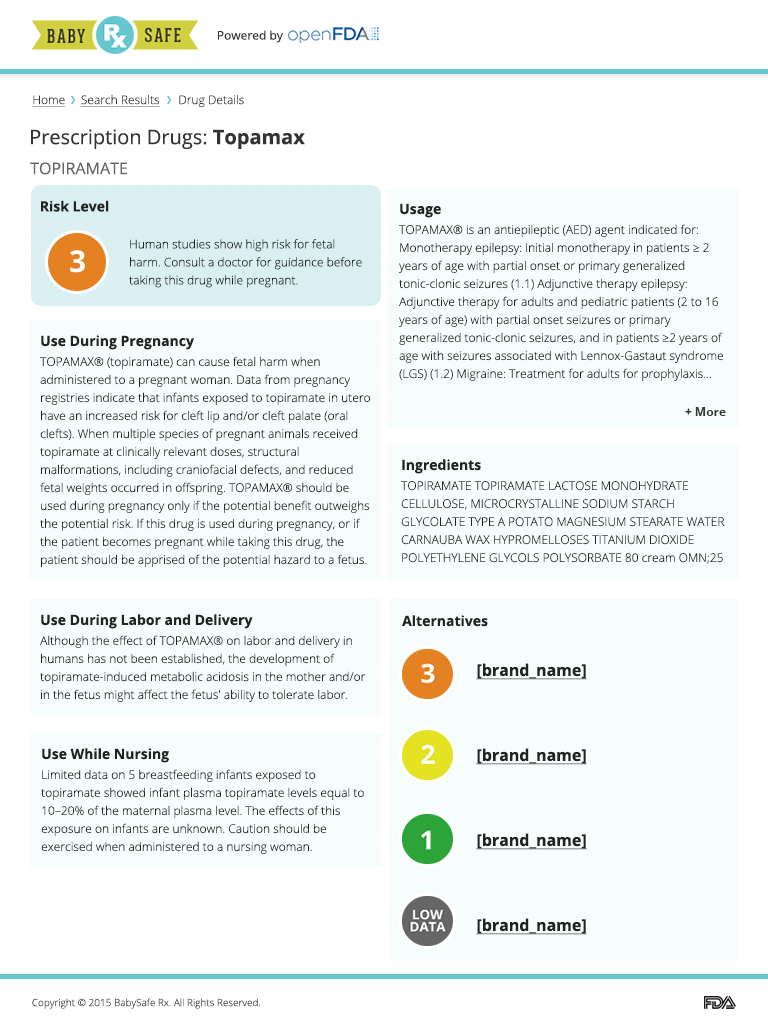
<style>
.page{position:relative;width:768px;height:1025px;background:#f7fcfc}
.page>*{position:absolute;margin:0}
.t1{font:12px "OpenSans";color:#333333}
.t2{font:12px "OpenSans-Light";color:#333333;text-decoration:underline}
.t3{font:12px "OpenSans-Light";color:#333333}
.t4{font:20px "OpenSans";color:#333333}
.t5{font:20px "OpenSans-Bold";color:#333333}
.t6{font:16px "OpenSans";color:#666666;text-transform:uppercase}
.t7{font:14px "OpenSans-Bold";color:#222222}
.t8{font:12px/18px "OpenSans-Light";color:#222222}
.t9{font:14px/20px "OpenSans-Bold";color:#222222}
.t10{font:12px/20px "OpenSans-Light";color:#222222}
.t11{font:12px "OpenSans-Bold";color:#333333}
.t12{font:16px/85px "OpenSans-Bold";color:#222222;text-decoration:underline}
.t13{font:10px "OpenSans-Light";color:#333333}
</style>
<div class="page">
<p class="t1" style="left:218px;top:30px;width:65px;height:13px">Powered by</p>
<p class="t2" style="left:32px;top:94px;width:212px;height:13px">Home     Search Results<span class="t3">      Drug Details</span></p>
<p class="t4" style="left:31px;top:129px;width:274px;height:20px">Prescription Drugs: <span class="t5">Topamax</span></p>
<p class="t6" style="left:30px;top:162px;width:97px;height:13px">TOPIRAMATE</p>
<p class="t7" style="left:41px;top:200px;width:68px;height:12px">Risk Level</p>
<p class="t8" style="left:399px;top:203px;width:324px;height:178px"><span class="t9">Usage<br></span><span class="t10">TOPAMAX® is an antiepileptic (AED) agent indicated for: </span>Monotherapy epilepsy: Initial monotherapy in patients ≥ 2 years of age with partial onset or primary generalized tonic-clonic seizures (1.1) Adjunctive therapy epilepsy: Adjunctive therapy for adults and pediatric patients (2 to 16 years of age) with partial onset seizures or primary generalized tonic-clonic seizures, and in patients ≥2 years of age with seizures associated with Lennox-Gastaut syndrome (LGS) (1.2) Migraine: Treatment for adults for prophylaxis...</p>
<p class="t8" style="left:129px;top:239px;width:233px;height:49px">Human studies show high risk for fetal harm. Consult a doctor for guidance before taking this drug while pregnant.</p>
<p class="t8" style="left:40px;top:335px;width:330px;height:232px"><span class="t9">Use During Pregnancy<br></span><span class="t10">TOPAMAX® (topiramate) can cause fetal harm when </span>administered to a pregnant woman. Data from pregnancy registries indicate that infants exposed to topiramate in utero have an increased risk for cleft lip and/or cleft palate (oral clefts). When multiple species of pregnant animals received topiramate at clinically relevant doses, structural malformations, including craniofacial defects, and reduced fetal weights occurred in offspring. TOPAMAX® should be used during pregnancy only if the potential benefit outweighs the potential risk. If this drug is used during pregnancy, or if the patient becomes pregnant while taking this drug, the patient should be apprised of the potential hazard to a fetus.</p>
<p class="t11" style="left:685px;top:407px;width:41px;height:9px">+ More</p>
<p class="t8" style="left:401px;top:459px;width:324px;height:105px"><span class="t9">Ingredients<br></span><span class="t10">TOPIRAMATE TOPIRAMATE LACTOSE MONOHYDRATE </span>CELLULOSE, MICROCRYSTALLINE SODIUM STARCH GLYCOLATE TYPE A POTATO MAGNESIUM STEARATE WATER CARNAUBA WAX HYPROMELLOSES TITANIUM DIOXIDE POLYETHYLENE GLYCOLS POLYSORBATE 80 cream OMN;25</p>
<p class="t8" style="left:40px;top:614px;width:326px;height:88px"><span class="t9">Use During Labor and Delivery<br></span><span class="t10">Although the effect of TOPAMAX® on labor and delivery in </span>humans has not been established, the development of topiramate-induced metabolic acidosis in the mother and/or in the fetus might affect the fetus' ability to tolerate labor.</p>
<p class="t7" style="left:402px;top:615px;width:86px;height:12px">Alternatives</p>
<p class="t12" style="left:476px;top:663px;width:111px;height:272px">[brand_name]<br>[brand_name]<br>[brand_name]<br>[brand_name]</p>
<p class="t8" style="left:41px;top:748px;width:323px;height:106px"><span class="t9">Use While Nursing<br></span><span class="t10">Limited data on 5 breastfeeding infants exposed to </span>topiramate showed infant plasma topiramate levels equal to 10–20% of the maternal plasma level. The effects of this exposure on infants are unknown. Caution should be exercised when administered to a nursing woman.</p>
<p class="t13" style="left:32px;top:998px;width:228px;height:11px">Copyright © 2015 BabySafe Rx. All Rights Reserved.</p>
</div>
